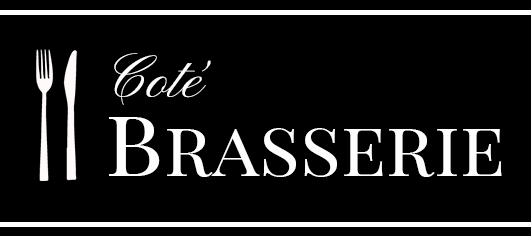
<style>
.page{position:relative;width:531px;height:236px;background:#000000}
.page>*{position:absolute;margin:0}
.t1{font:61.1px "PinyonScript";color:#fefefe}
.t2{font:76.4px "PlayfairDisplaySC-Regular";color:#fefefe}
.t3{font:96.8px "PlayfairDisplaySC-Regular";color:#fefefe}
</style>
<div class="page">
<p class="t1" style="left:114px;top:53px;width:97px;height:52px">Coté</p>
<p class="t2" style="left:109px;top:117px;width:393px;height:60px"><span class="t3">b</span>rasserie</p>
</div>
